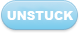
<style>
.page{position:relative;width:79px;height:33px}
.page>*{position:absolute;margin:0}
.t1{font:12px "Arial-Black";color:#ffffff}
</style>
<div class="page">
<p class="t1" style="left:7px;top:11px;width:67px;height:9px">UNSTUCK</p>
</div>
